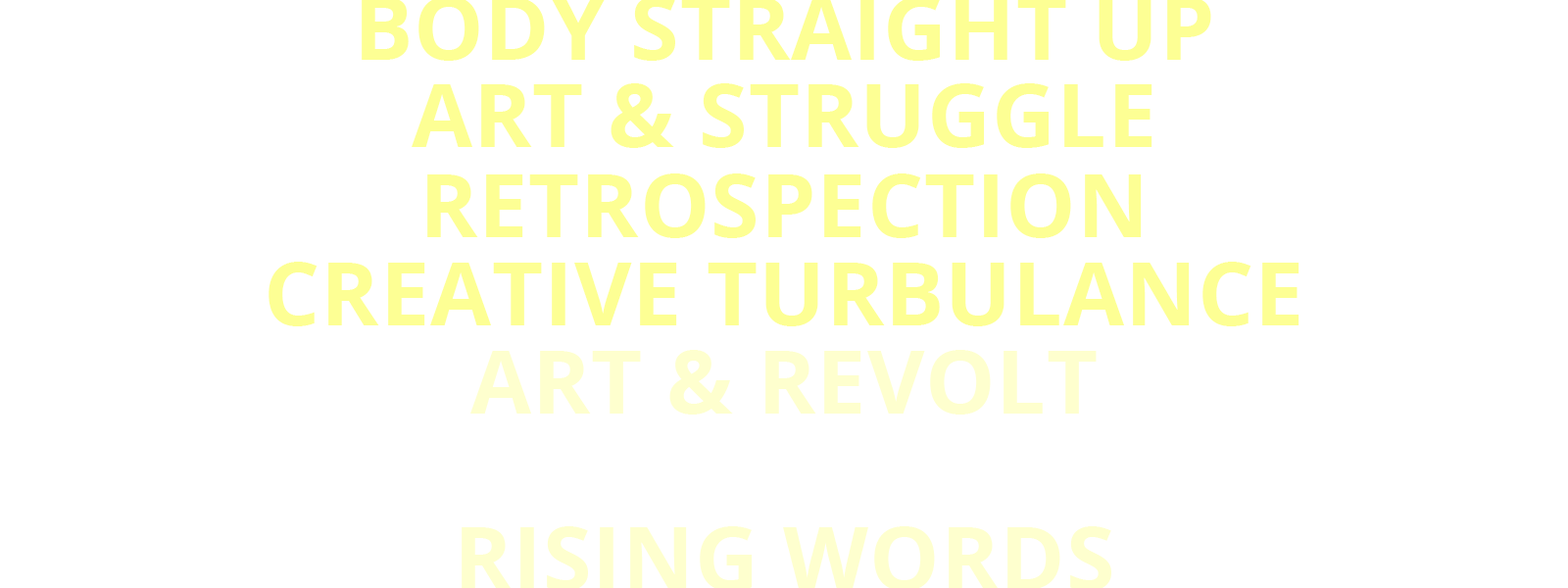
<style>
.page{position:relative;width:1568px;height:588px;background:#ffffff}
.page>*{position:absolute;margin:0}
.t1{font:88.2px "OpenSans-Bold";letter-spacing:0.01em;color:#fdff94;text-transform:uppercase}
.t2{font:88.2px "OpenSans-Bold";letter-spacing:0.01em;color:#feffce;text-transform:uppercase}
</style>
<div class="page">
<p class="t1" style="left:412px;top:83px;width:740px;height:65px">art &amp; struggle</p>
<p class="t1" style="left:427px;top:173px;width:715px;height:65px">retrospection</p>
<p class="t1" style="left:269px;top:262px;width:1030px;height:64px">creative turbulance</p>
<p class="t2" style="left:470px;top:350px;width:627px;height:65px">art &amp; revolt</p>
</div>
